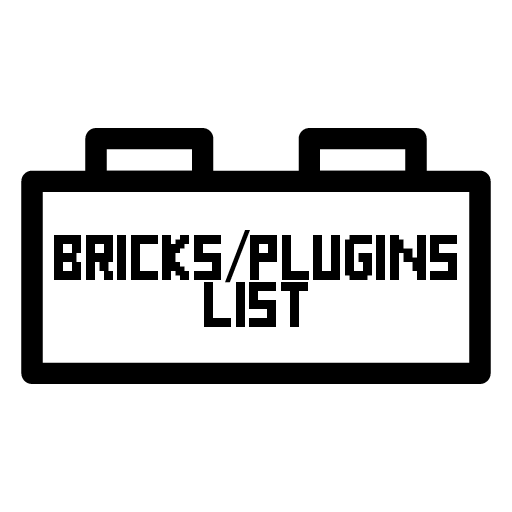
<style>
.page{position:relative;width:512px;height:512px;background:#ffffff}
.page>*{position:absolute;margin:0}
.t1{font:72px "Pixel";color:#000000}
.t2{font:72px "MyriadPro-Regular";color:#000000}
</style>
<div class="page">
<p class="t1" style="left:54px;top:230px;width:403px;height:53px">Bricks<span class="t2">/</span>Plugins</p>
<p class="t1" style="left:204px;top:282px;width:104px;height:45px">List</p>
</div>
